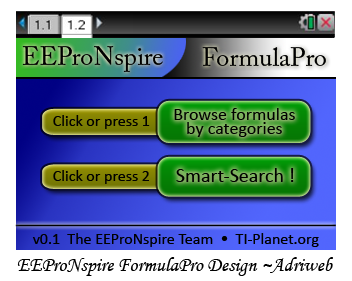
<style>
.page{position:relative;width:352px;height:281px;background:#ffffff}
.page>*{position:absolute;margin:0}
.t1{font:26px "ACaslonPro-Regular";color:#000000}
.t2{font:18px/3.6px "Calibri";color:#000000}
.t3{font:12px/3.6px "Calibri";color:#000000}
.t4{font:16px "Calibri";color:#000000}
.t5{font:20px "Calibri";color:#000000}
.t6{font:20px "MonotypeCorsiva";color:#000000}
</style>
<div class="page">
<p class="t1" style="left:22px;top:46px;width:141px;height:26px">EEProNspire</p>
<p class="t1" style="left:202px;top:47px;width:124px;height:19px">FormulaPro</p>
<p class="t2" style="left:174px;top:108px;width:121px;height:29px;text-align:center">Browse formulas<br><span class="t3"> <br><br><br></span>by categories</p>
<p class="t4" style="left:53px;top:115px;width:97px;height:14px">Click or press 1</p>
<p class="t4" style="left:53px;top:170px;width:96px;height:14px">Click or press 2</p>
<p class="t5" style="left:176px;top:168px;width:118px;height:14px">Smart-Search !</p>
<p class="t4" style="left:32px;top:233px;width:287px;height:14px">v0.1  The EEProNspire Team  •  TI-Planet.org</p>
<p class="t6" style="left:17px;top:257px;width:316px;height:19px">EEProNspire FormulaPro Design ~Adriweb</p>
</div>
